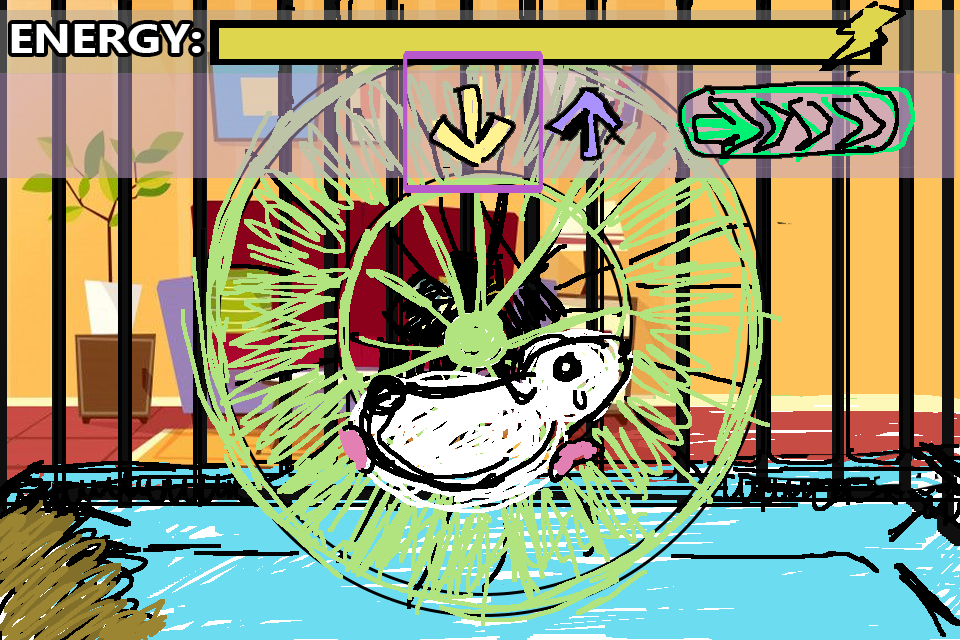
<style>
.page{position:relative;width:960px;height:640px}
.page>*{position:absolute;margin:0}
.t1{font:41.3px "Gadugi-Bold";color:#ffffff;scale:1.15 1}
</style>
<div class="page">
<p class="t1" style="left:11px;top:24px;width:190px;height:29px">ENERGY:</p>
</div>
